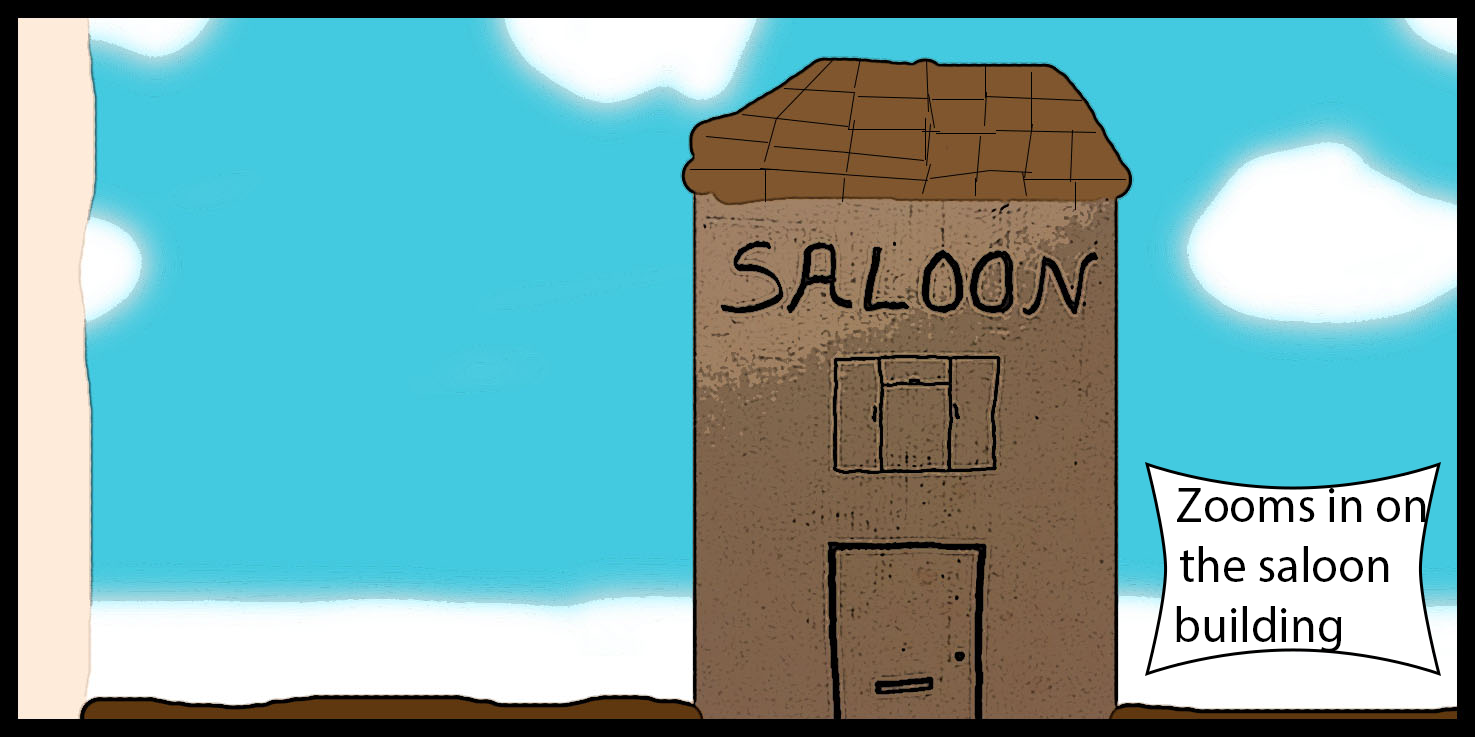
<style>
.page{position:relative;width:1475px;height:737px;background:#43cae0}
.page>*{position:absolute;margin:0}
.t1{font:50px "MyriadPro-Regular";color:#000000}
</style>
<div class="page">
<p class="t1" style="left:1176px;top:488px;width:250px;height:164px">Zooms in on the saloon building</p>
</div>
